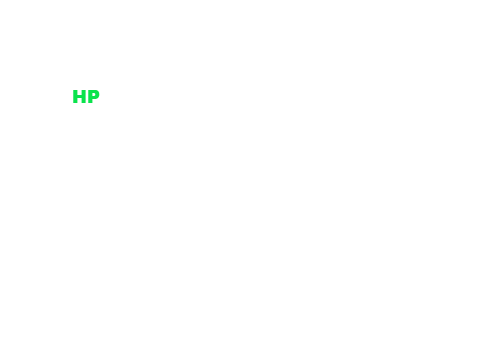
<style>
.page{position:relative;width:504px;height:360px;background:#ffffff}
.page>*{position:absolute;margin:0}
.t1{font:18px "Arial-Black";color:#0ae34c}
</style>
<div class="page">
<p class="t1" style="left:73px;top:90px;width:27px;height:13px">HP</p>
</div>
